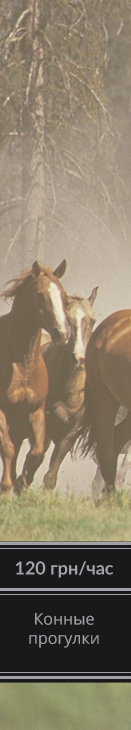
<style>
.page{position:relative;width:131px;height:730px}
.page>*{position:absolute;margin:0}
.t1{font:18px "Lato-Bold";color:#a2a1aa}
.t2{font:16px "OpenSans";color:#a2a1aa}
</style>
<div class="page">
<p class="t1" style="left:15px;top:561px;width:99px;height:17px">120 грн/час</p>
<p class="t2" style="left:29px;top:613px;width:70px;height:35px;text-align:center">Конные<br>прогулки</p>
</div>
